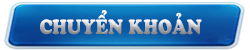
<style>
.page{position:relative;width:250px;height:50px}
.page>*{position:absolute;margin:0}
.t1{font:21.6px "UTM-Cooper-Black";text-transform:uppercase;scale:0.83 1}
</style>
<div class="page">
<p class="t1" style="left:40px;top:10px;width:162px;height:25px">CHUYỂN KHOẢN</p>
</div>
